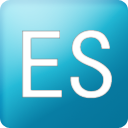
<style>
.page{position:relative;width:128px;height:128px}
.page>*{position:absolute;margin:0}
.t1{font:100px "SimHei";color:#ffffff}
</style>
<div class="page">
<p class="t1" style="left:22px;top:30px;width:90px;height:69px">ES</p>
</div>
